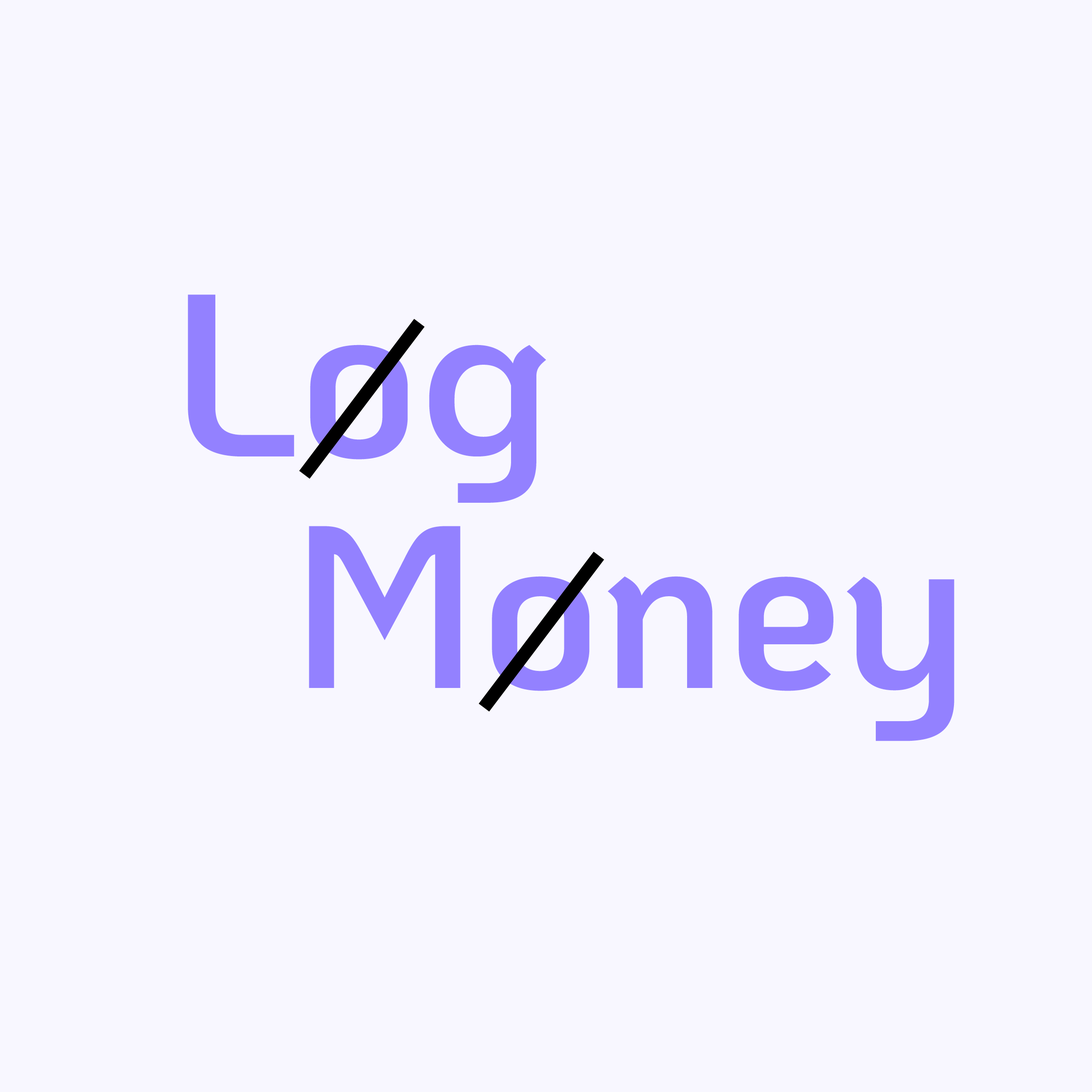
<style>
.page{position:relative;width:1092px;height:1092px;background:#f8f7ff}
.page>*{position:absolute;margin:0}
.t1{font:231.1px "KoHo-SemiBold";color:#9381ff}
</style>
<div class="page">
<p class="t1" style="left:188px;top:294px;width:358px;height:209px">Log</p>
<p class="t1" style="left:309px;top:526px;width:645px;height:215px">Money</p>
</div>
